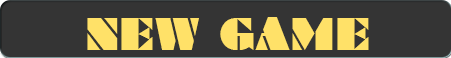
<style>
.page{position:relative;width:451px;height:58px;background:#343434}
.page>*{position:absolute;margin:0}
.t1{font:72.1px "Braggadocio";letter-spacing:0.01em;color:#ffe168;scale:0.91 1}
</style>
<div class="page">
<p class="t1" style="left:87px;top:17px;width:282px;height:33px">NEW GAME</p>
</div>
